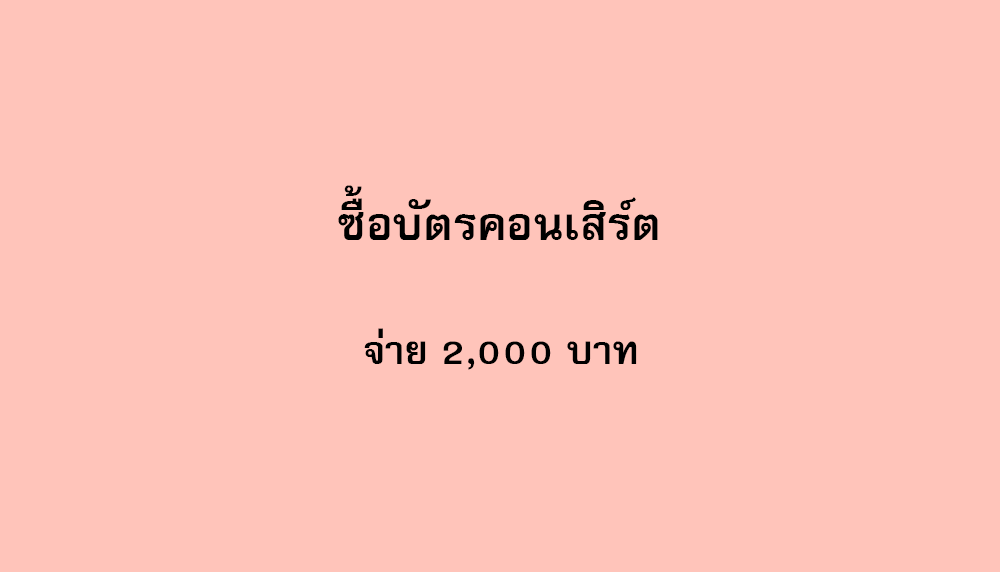
<style>
.page{position:relative;width:1000px;height:572px;background:#ffc4ba}
.page>*{position:absolute;margin:0}
.t1{font:64px "FreesiaUPCBold";color:#000000}
.t2{font:56px "FreesiaUPCBold";color:#000000}
</style>
<div class="page">
<p class="t1" style="left:338px;top:185px;width:320px;height:55px">ซื้อบัตรคอนเสิร์ต</p>
<p class="t2" style="left:364px;top:328px;width:273px;height:42px">จ่าย 2,000 บาท</p>
</div>
